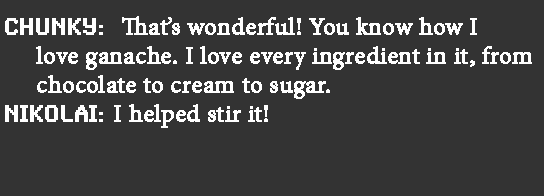
<style>
.page{position:relative;width:544px;height:196px;background:#333333}
.page>*{position:absolute;margin:0}
.t1{font:24px "MinionPro-Regular";color:#ffffff;font-weight:bold}
.t2{font:24px "SynchroLET";color:#ffffff;font-weight:bold}
</style>
<div class="page">
<p class="t1" style="left:5px;top:16px;width:527px;height:112px"><span class="t2">CHUNKY:  </span>That’s wonderful! You know how I <br>     love ganache. I love every ingredient in it, from<br>     chocolate to cream to sugar. <br><span class="t2">NIKOLAI: </span>I helped stir it!</p>
</div>
